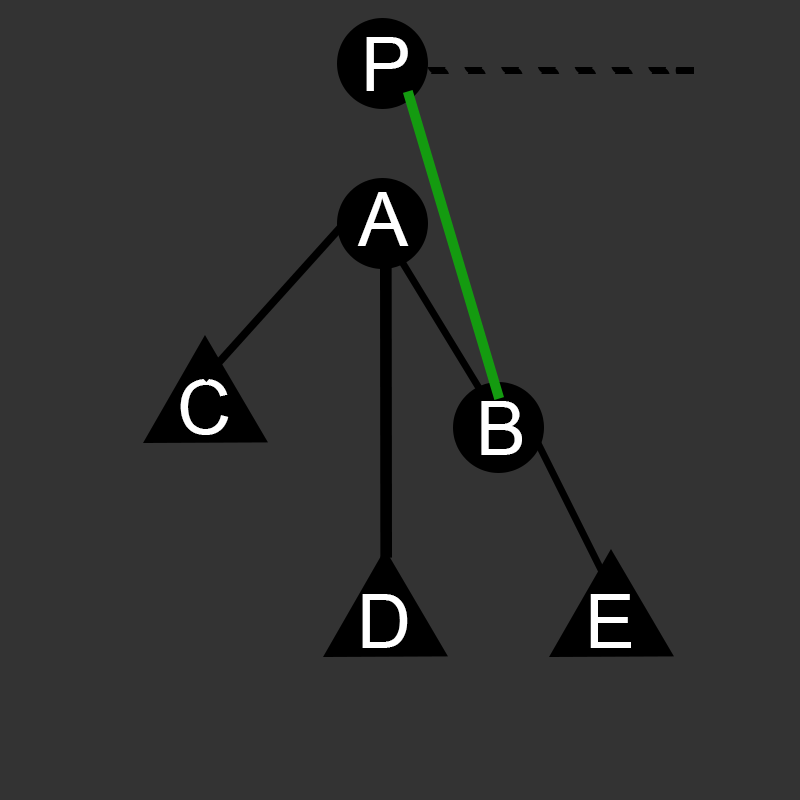
<style>
.page{position:relative;width:800px;height:800px;background:#333333}
.page>*{position:absolute;margin:0}
.t1{font:75px "ArialMT";letter-spacing:0.04em;color:#ffffff}
</style>
<div class="page">
<p class="t1" style="left:366px;top:37px;width:42px;height:54px">P</p>
<p class="t1" style="left:357px;top:192px;width:52px;height:54px">A</p>
<p class="t1" style="left:180px;top:379px;width:49px;height:56px">C</p>
<p class="t1" style="left:481px;top:401px;width:41px;height:54px">B</p>
<p class="t1" style="left:362px;top:594px;width:46px;height:54px">D</p>
<p class="t1" style="left:590px;top:594px;width:41px;height:54px">E</p>
</div>
